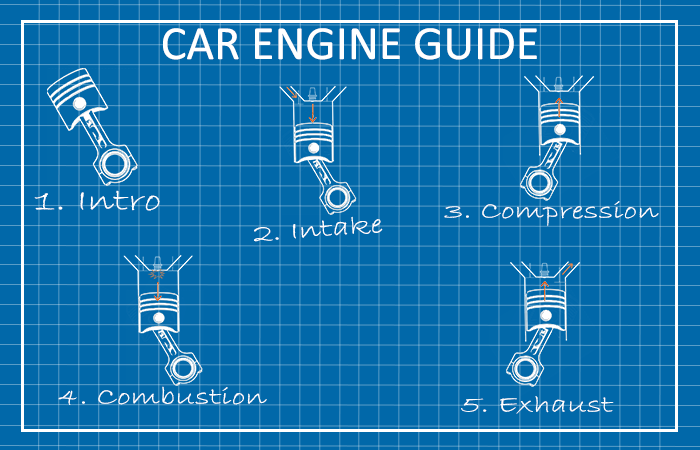
<style>
.page{position:relative;width:700px;height:450px;background:#0168a9}
.page>*{position:absolute;margin:0}
.t1{font:48px "Calibri";color:#ffffff}
.t2{font:32.4px "BradleyHandITC";color:#ffffff;scale:1.3 1}
.t3{font:24.6px "BradleyHandITC";color:#ffffff;scale:1.37 1}
.t4{font:26.7px "BradleyHandITC";color:#ffffff;scale:1.3 1}
</style>
<div class="page">
<p class="t1" style="left:163px;top:28px;width:374px;height:32px">CAR ENGINE GUIDE</p>
<p class="t2" style="left:34px;top:190px;width:126px;height:21px">1. Intro</p>
<p class="t3" style="left:444px;top:201px;width:215px;height:25px">3. Compression</p>
<p class="t4" style="left:254px;top:216px;width:129px;height:26px;rotate:-4deg">2. Intake</p>
<p class="t3" style="left:58px;top:386px;width:209px;height:19px">4. Combustion</p>
<p class="t3" style="left:461px;top:396px;width:153px;height:18px">5. Exhaust</p>
</div>
